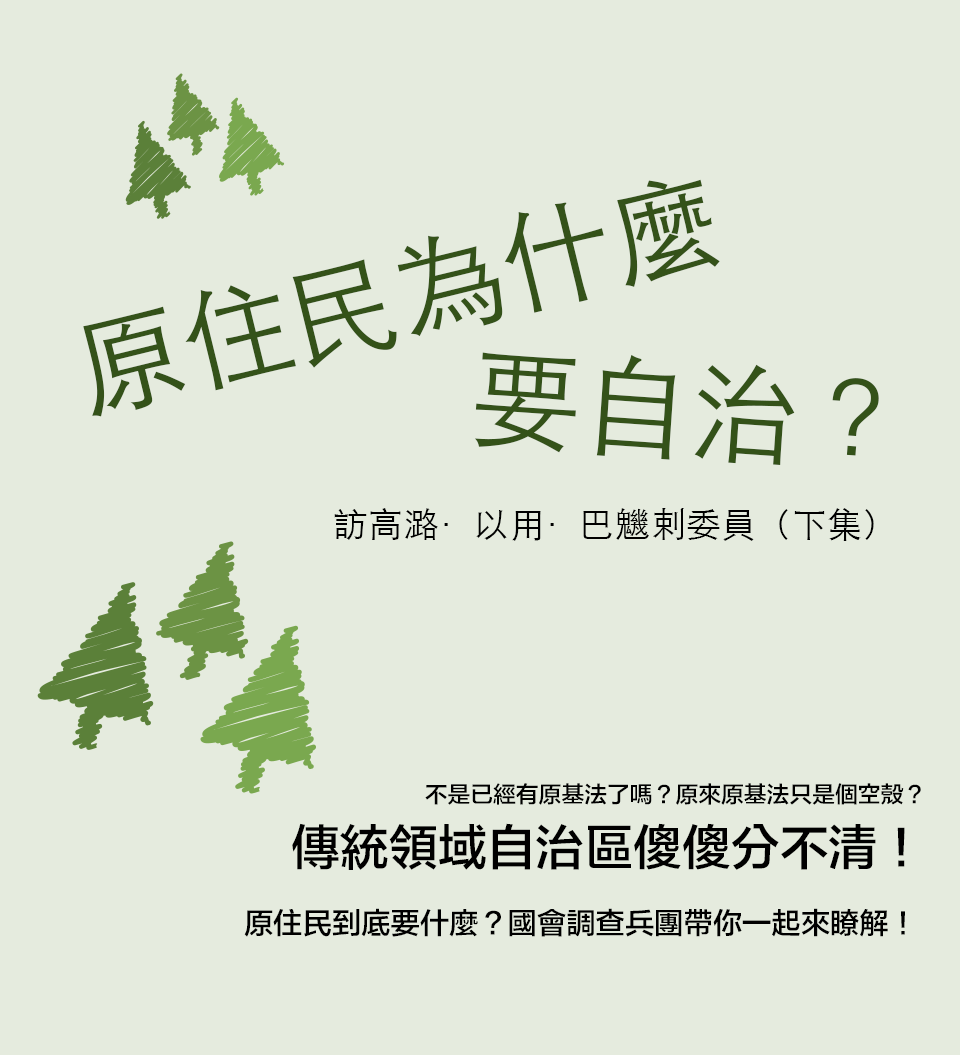
<style>
.page{position:relative;width:960px;height:1055px;background:#e5ebde}
.page>*{position:absolute;margin:0}
.t1{font:110px "STHeitiTC-Light";color:#345219}
.t2{font:35.3px "STHeitiTC-Light";color:#000000}
.t3{font:29.3px "FZLTZHB--B51-0";color:#000000}
.t4{font:22.8px "FZLTZHB--B51-0";color:#000000}
.t5{font:48.9px "FZLTZHB--B51-0";color:#000000}
</style>
<div class="page">
<p class="t1" style="left:83px;top:179px;width:637px;height:238px;rotate:-14deg">原住民為什麼</p>
<p class="t1" style="left:474px;top:352px;width:405px;height:113px;rotate:4deg">要自治？</p>
<p class="t2" style="left:334px;top:508px;width:540px;height:33px">訪高潞·以用·巴魕剌委員（下集）</p>
<p class="t3" style="left:244px;top:783px;width:677px;height:154px;text-align:right"><span class="t4">不是已經有原基法了嗎？原來原基法只是個空殼？<br></span><span class="t5">傳統領域自治區傻傻分不清！<br></span>原住民到底要什麼？國會調查兵團帶你一起來瞭解！</p>
</div>
